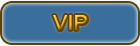
<style>
.page{position:relative;width:140px;height:46px;background:#3a6e9b}
.page>*{position:absolute;margin:0}
.t1{font:24px "Latha"}
</style>
<div class="page">
<p class="t1" style="left:53px;top:15px;width:34px;height:15px">VIP</p>
</div>
